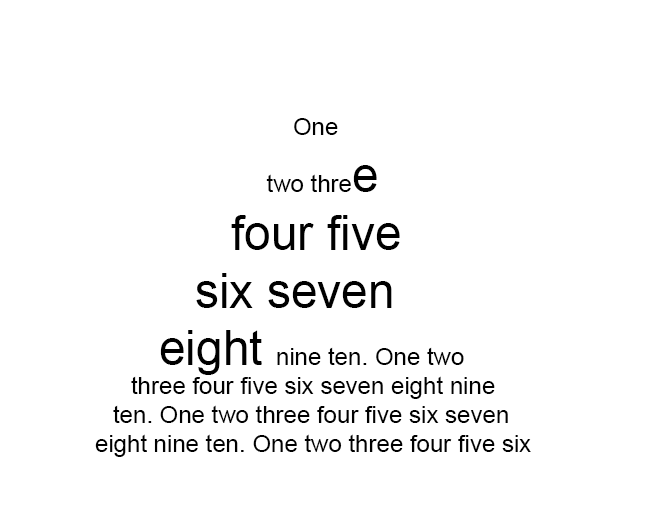
<style>
.page{position:relative;width:660px;height:520px;background:#ffffff}
.page>*{position:absolute;margin:0}
.t1{font:24px "ArialMT";color:#000000}
.t2{font:48px "ArialMT";color:#000000}
</style>
<div class="page">
<p class="t1" style="left:95px;top:118px;width:436px;height:339px">One two thre<span class="t2">e four five six seven eight </span>nine ten. One two three four five six seven eight nine ten. One two three four five six seven eight nine ten. One two three four five six seven eight nine ten. One two three four five six seven eight nine ten. One two three four five six seven eight nine ten. One two three four five six seven eight nine ten. One two three four five six seven eight nine ten.</p>
</div>
